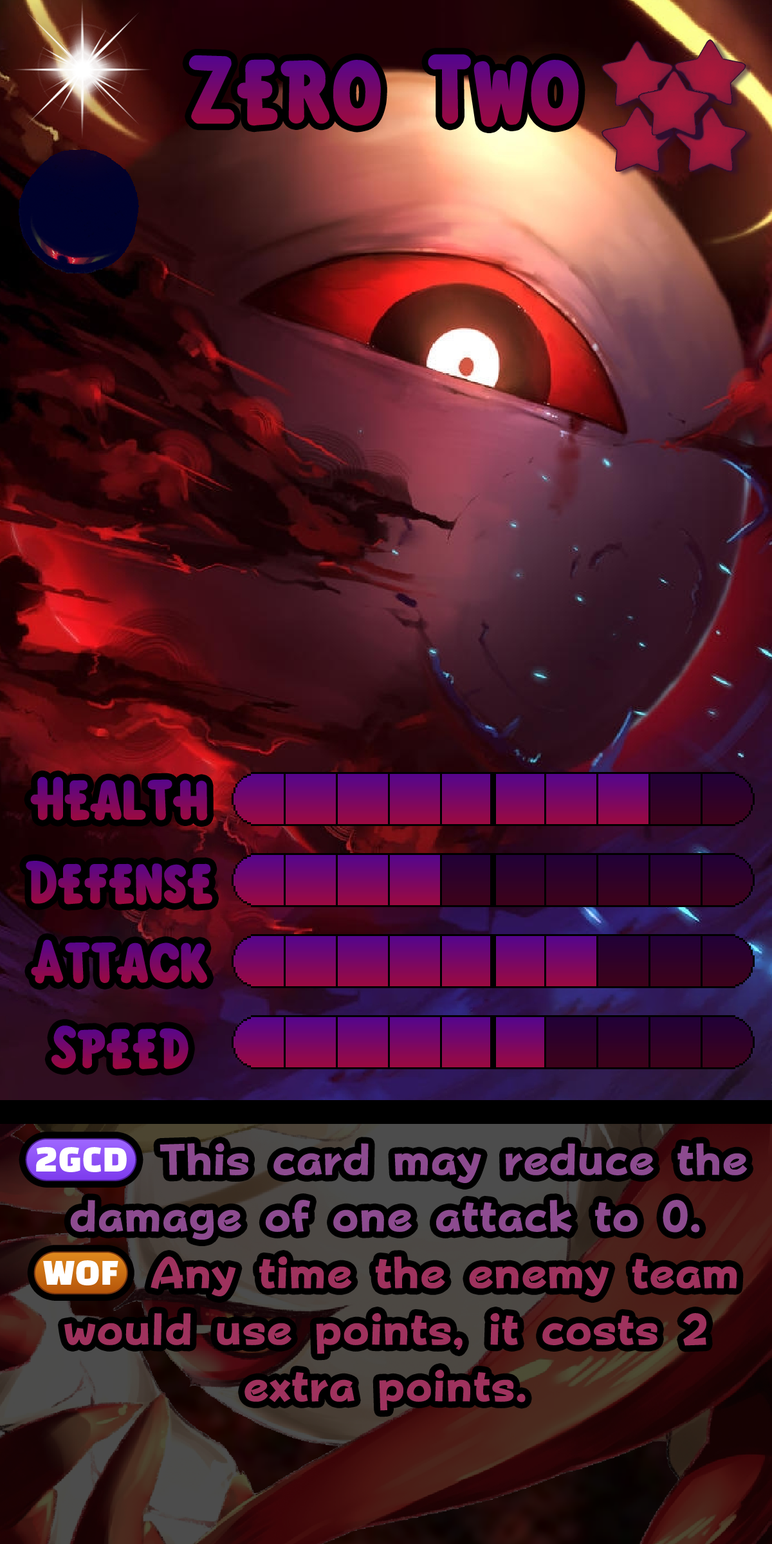
<style>
.page{position:relative;width:772px;height:1544px}
.page>*{position:absolute;margin:0}
.t1{font:151.9px "KirbyClassic"}
.t2{font:92.7px "KirbyClassic"}
.t3{font:75.3px/56.6px "FOTPopHappinessStrp-ExtraBold";color:#9e325d}
.t4{font:75.3px/56.6px "stoogedings-Regular";color:#8c4b8f}
.t5{font:75.3px/56.6px "FOTPopHappinessStrp-ExtraBold";color:#8c4b8f}
.t6{font:75.3px/56.6px "stoogedings-Regular";color:#9e325d}
</style>
<div class="page">
<p class="t1" style="left:189px;top:54px;width:390px;height:73px">Zero Two</p>
<p class="t2" style="left:30px;top:777px;width:178px;height:44px">Health</p>
<p class="t2" style="left:26px;top:861px;width:186px;height:44px">Defense</p>
<p class="t2" style="left:31px;top:939px;width:176px;height:45px">Attack</p>
<p class="t2" style="left:51px;top:1026px;width:138px;height:43px">Speed</p>
<p class="t3" style="left:25px;top:1138px;width:723px;height:273px;text-align:center"><span class="t4">(2GCD)</span><span class="t5"> This card may reduce the damage of one attack to 0. <br></span><span class="t6">(WOF)</span> Any time the enemy team would use points, it costs 2 extra points.</p>
</div>
